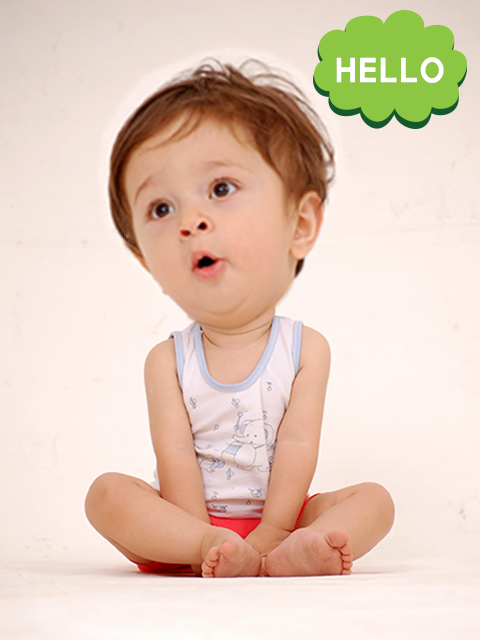
<style>
.page{position:relative;width:480px;height:640px}
.page>*{position:absolute;margin:0}
.t1{font:30px "ExpoM-HM";letter-spacing:0.1em;color:#ffffff;font-weight:bold;scale:0.88 1}
</style>
<div class="page">
<p class="t1" style="left:336px;top:57px;width:108px;height:26px">HELLO</p>
</div>
